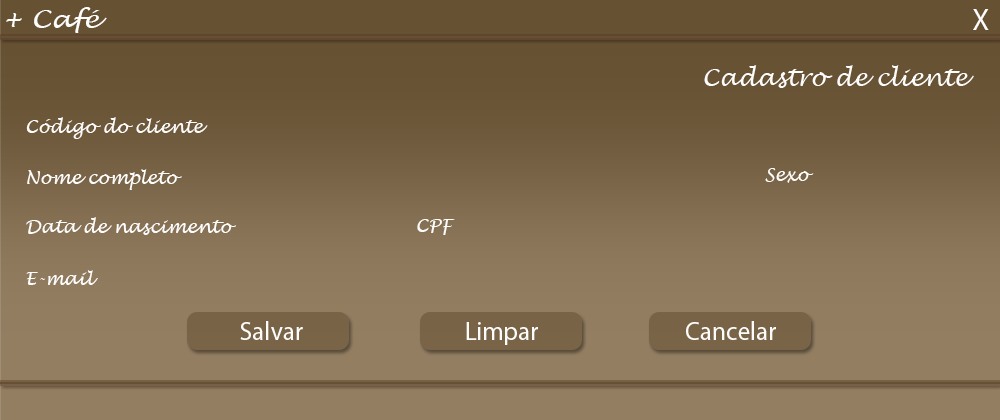
<style>
.page{position:relative;width:1000px;height:420px}
.page>*{position:absolute;margin:0}
.t1{font:25px "LucidaHandwriting-Italic";color:#fefdfb;scale:1.11 1}
.t2{font:30.1px "MyriadPro-Regular";color:#fefdfb}
.t3{font:24px "LucidaHandwriting-Italic";color:#fefdfb}
.t4{font:18px "LucidaHandwriting-Italic";color:#fefdfb}
.t5{font:55.1px "MyriadPro-Regular";color:#fefdfb}
.t6{font:25.9px "MyriadPro-Regular";color:#fefdfb}
.t7{font:55.4px "MyriadPro-Regular";color:#fefdfb}
</style>
<div class="page">
<p class="t1" style="left:6px;top:7px;width:101px;height:26px">+ Café</p>
<p class="t2" style="left:973px;top:9px;width:16px;height:21px">X</p>
<p class="t3" style="left:704px;top:65px;width:270px;height:23px">Cadastro de cliente</p>
<p class="t4" style="left:26px;top:117px;width:182px;height:22px">Código do cliente<br><span class="t5">Non</span></p>
<p class="t4" style="left:27px;top:169px;width:155px;height:21px">Nome completo<br><span class="t5">Non</span></p>
<p class="t4" style="left:765px;top:168px;width:49px;height:15px">Sexo<br><span class="t5">Non</span></p>
<p class="t4" style="left:26px;top:217px;width:210px;height:18px">Data de nascimento<br><span class="t5">Non</span></p>
<p class="t4" style="left:417px;top:219px;width:38px;height:16px">CPF<br><span class="t5">Non</span></p>
<p class="t4" style="left:26px;top:270px;width:72px;height:15px">E-mail<br><span class="t5">Non</span></p>
<p class="t6" style="left:240px;top:321px;width:63px;height:19px">Salvar<br><br><br><span class="t7">Non</span></p>
<p class="t6" style="left:466px;top:322px;width:72px;height:23px">Limpar<br><br><br><span class="t7">Non</span></p>
<p class="t6" style="left:686px;top:321px;width:90px;height:19px">Cancelar<br><br><br><br><span class="t7">Non</span></p>
</div>
